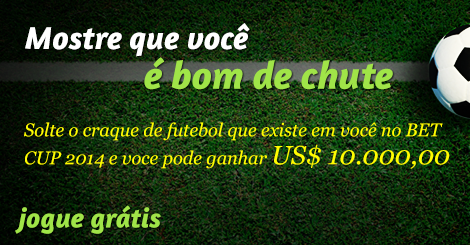
<style>
.page{position:relative;width:470px;height:245px}
.page>*{position:absolute;margin:0}
.t1{font:32.5px/39.7px "Amaranth-BoldItalic";color:#ffffff}
.t2{font:39.7px/39.7px "Amaranth-BoldItalic";color:#a0e448}
.t3{font:18.2px/28.1px "Georgia-Italic";color:#fffc00}
.t4{font:26.2px/28.1px "Georgia-Italic";color:#fffc00}
.t5{font:27.9px "Amaranth-BoldItalic";color:#a0e448}
</style>
<div class="page">
<p class="t1" style="left:25px;top:23px;width:368px;height:67px">Mostre que você <br>    <span class="t2">é bom de chute</span></p>
<p class="t3" style="left:24px;top:122px;width:426px;height:47px">Solte o craque de futebol que existe em você no BET CUP 2014 e voce pode ganhar <span class="t4">US$ 10.000,00</span></p>
<p class="t5" style="left:15px;top:205px;width:146px;height:29px">jogue grátis</p>
</div>
